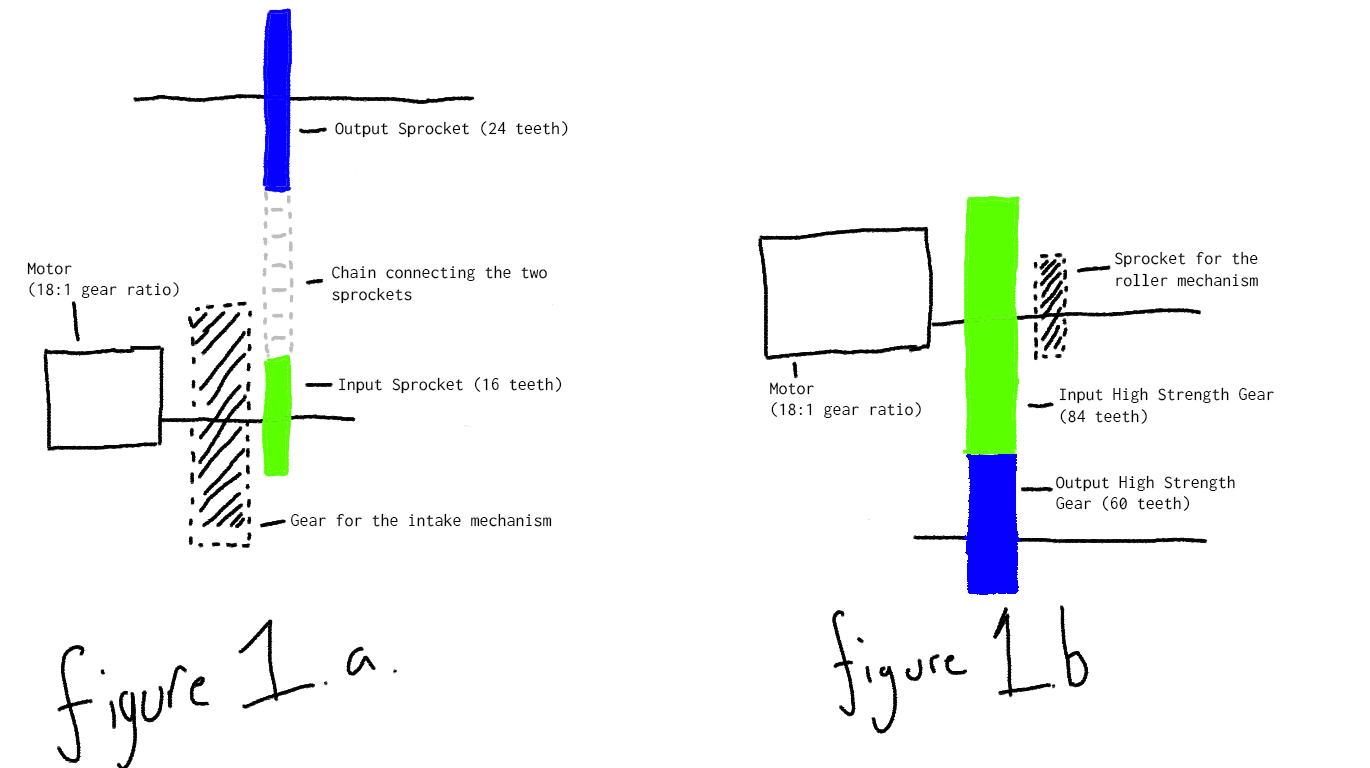
<style>
.page{position:relative;width:1370px;height:768px;background:#ffffff}
.page>*{position:absolute;margin:0}
.t1{font:18px "Inconsolata-Regular";color:#000000}
</style>
<div class="page">
<p class="t1" style="left:335px;top:121px;width:233px;height:17px">Output Sprocket (24 teeth)</p>
<p class="t1" style="left:1115px;top:251px;width:143px;height:36px">Sprocket for the<br>roller mechanism</p>
<p class="t1" style="left:27px;top:262px;width:152px;height:36px">Motor <br>(18:1 gear ratio)</p>
<p class="t1" style="left:332px;top:265px;width:215px;height:39px">Chain connecting the two<br>sprockets</p>
<p class="t1" style="left:339px;top:377px;width:223px;height:17px">Input Sprocket (16 teeth)</p>
<p class="t1" style="left:770px;top:382px;width:151px;height:36px">Motor <br>(18:1 gear ratio)</p>
<p class="t1" style="left:1059px;top:387px;width:215px;height:37px">Input High Strength Gear<br>(84 teeth)</p>
<p class="t1" style="left:1056px;top:475px;width:179px;height:36px">Output High Strength<br>Gear (60 teeth)</p>
<p class="t1" style="left:291px;top:513px;width:261px;height:14px">Gear for the intake mechanism</p>
</div>
